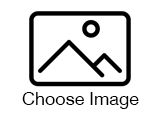
<style>
.page{position:relative;width:160px;height:120px;background:#ffffff}
.page>*{position:absolute;margin:0}
.t1{font:17.9px "HelveticaNeue";color:#000000}
</style>
<div class="page">
<p class="t1" style="left:22px;top:92px;width:117px;height:17px">Choose Image</p>
</div>
